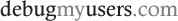
<style>
.page{position:relative;width:178px;height:21px;background:#ffffff}
.page>*{position:absolute;margin:0}
.t1{font:22px "CalistoMT";color:#1f1f1f}
.t2{font:22px "CalistoMT";color:#7f7f7f}
</style>
<div class="page">
<p class="t1" style="left:0px;top:0px;width:178px;height:21px">debug<span class="t2">my</span>users<span class="t2">.com</span></p>
</div>
